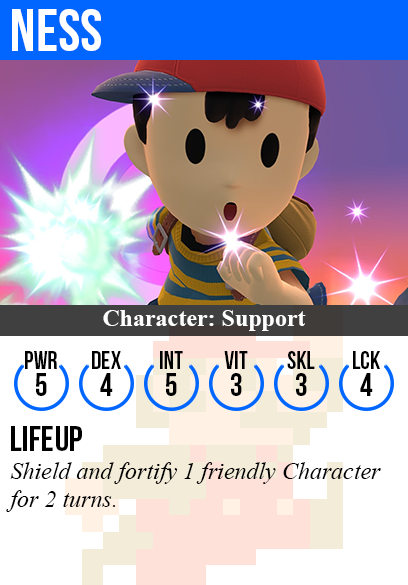
<style>
.page{position:relative;width:408px;height:585px;background:#ffffff}
.page>*{position:absolute;margin:0}
.t1{font:60px "BebasNeue";color:#ffffff}
.t2{font:24px "TimesNewRomanPS-BoldMT";color:#ffffff}
.t3{font:25px "BebasNeue";color:#000000}
.t4{font:32px "BebasNeue";color:#000000}
.t5{font:36px "BebasNeue";color:#000000}
.t6{font:24px "TimesNewRomanPS-ItalicMT";color:#000000}
</style>
<div class="page">
<p class="t1" style="left:12px;top:9px;width:89px;height:42px">ness</p>
<p class="t2" style="left:103px;top:310px;width:203px;height:21px">Character: Support</p>
<p class="t3" style="left:25px;top:351px;width:32px;height:18px">PWR</p>
<p class="t3" style="left:92px;top:351px;width:29px;height:18px">dex</p>
<p class="t3" style="left:160px;top:351px;width:23px;height:18px">int</p>
<p class="t3" style="left:224px;top:351px;width:24px;height:18px">vit</p>
<p class="t3" style="left:287px;top:351px;width:28px;height:18px">skl</p>
<p class="t3" style="left:353px;top:351px;width:27px;height:18px">lck</p>
<p class="t4" style="left:36px;top:373px;width:11px;height:23px">5</p>
<p class="t4" style="left:100px;top:373px;width:13px;height:23px">4</p>
<p class="t4" style="left:166px;top:373px;width:11px;height:23px">5</p>
<p class="t4" style="left:231px;top:373px;width:11px;height:23px">3</p>
<p class="t4" style="left:296px;top:373px;width:11px;height:23px">3</p>
<p class="t4" style="left:360px;top:373px;width:13px;height:23px">4</p>
<p class="t5" style="left:11px;top:426px;width:71px;height:25px">lifeup</p>
<p class="t6" style="left:6px;top:462px;width:375px;height:50px">Shield and fortify 1 friendly Character<br>for 2 turns.</p>
</div>
